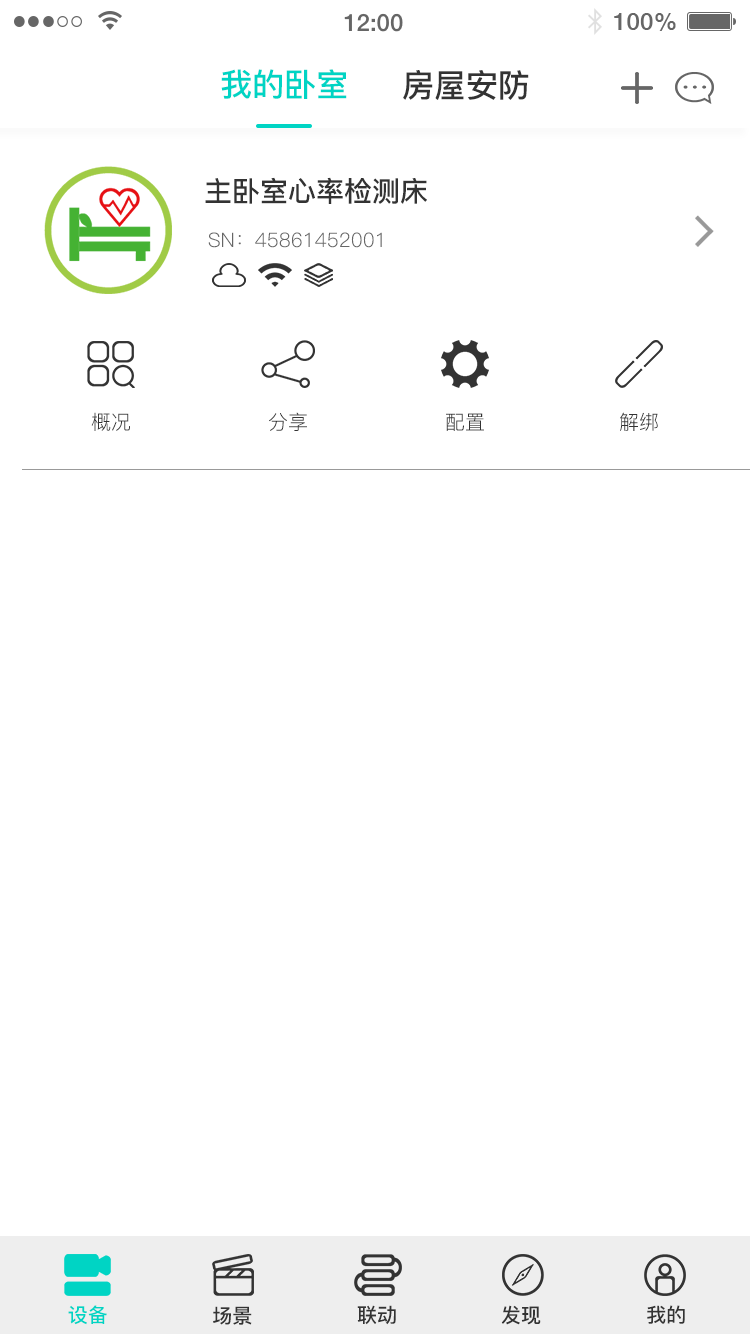
<style>
.page{position:relative;width:750px;height:1334px;background:#ffffff}
.page>*{position:absolute;margin:0}
.t1{font:32px "PingFang-SC-Bold";color:#00d4c4}
.t2{font:32px "PingFang-SC-Bold";color:#333333}
.t3{font:28px "PingFang-SC-Bold";color:#333333}
.t4{font:20px "PingFang-SC-Regular";color:#666666}
.t5{font:20px "PingFang-SC-Regular";color:#333333}
.t6{font:20px "PingFang-SC-Bold";color:#00d4c4}
.t7{font:20px "PingFang-SC-Bold";color:#333333}
</style>
<div class="page">
<p class="t1" style="left:221px;top:69px;width:126px;height:30px">我的卧室</p>
<p class="t2" style="left:403px;top:70px;width:126px;height:30px">房屋安防</p>
<p class="t3" style="left:205px;top:177px;width:222px;height:27px">主卧室心率检测床</p>
<p class="t4" style="left:208px;top:232px;width:174px;height:16px">SN：45861452001</p>
<p class="t5" style="left:91px;top:412px;width:39px;height:19px">概况</p>
<p class="t5" style="left:269px;top:412px;width:38px;height:19px">分享</p>
<p class="t5" style="left:446px;top:413px;width:38px;height:18px">配置</p>
<p class="t5" style="left:620px;top:412px;width:38px;height:19px">解绑</p>
<p class="t6" style="left:68px;top:1305px;width:39px;height:20px">设备</p>
<p class="t7" style="left:213px;top:1306px;width:39px;height:19px">场景</p>
<p class="t7" style="left:357px;top:1305px;width:39px;height:20px">联动</p>
<p class="t7" style="left:501px;top:1305px;width:40px;height:20px">发现</p>
<p class="t7" style="left:647px;top:1305px;width:38px;height:19px">我的</p>
</div>
